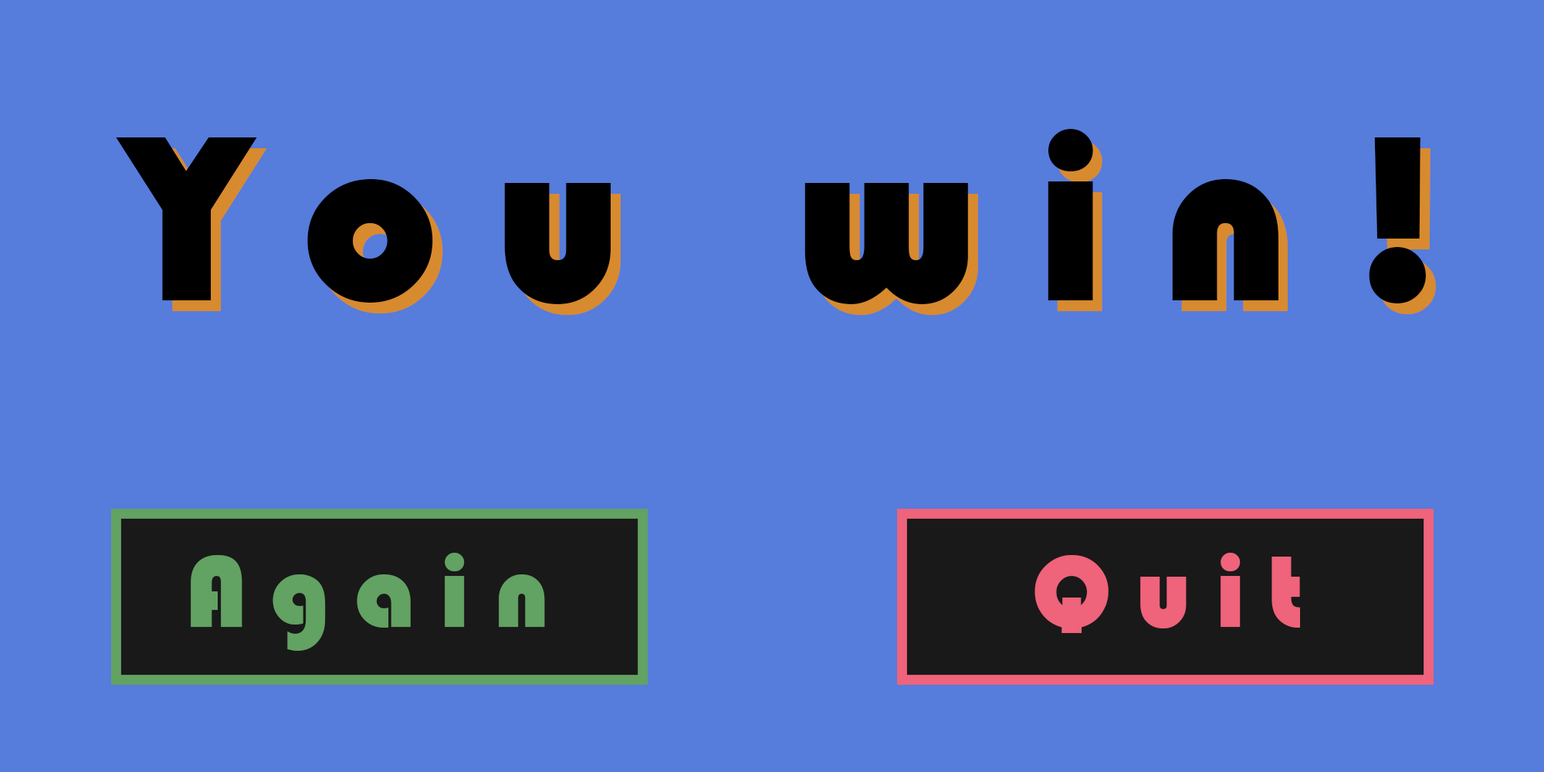
<style>
.page{position:relative;width:1544px;height:772px;background:#567cdc}
.page>*{position:absolute;margin:0}
.t1{font:244px "Bauhaus93";letter-spacing:0.22em;color:#000000}
.t2{font:105.2px "Bauhaus93";letter-spacing:0.22em;color:#62a262}
.t3{font:105.2px "Bauhaus93";letter-spacing:0.22em;color:#ef637b}
</style>
<div class="page">
<p class="t1" style="left:116px;top:129px;width:1310px;height:175px">You win!</p>
<p class="t1" style="left:126px;top:140px;width:1310px;height:175px">You win!</p>
<p class="t2" style="left:191px;top:553px;width:354px;height:98px">Again</p>
<p class="t3" style="left:1035px;top:553px;width:265px;height:80px">Quit</p>
</div>
